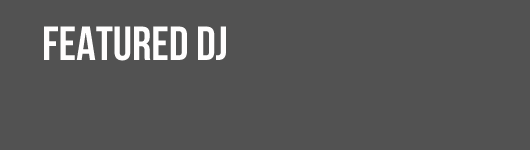
<style>
.page{position:relative;width:530px;height:150px;background:#525252}
.page>*{position:absolute;margin:0}
.t1{font:48px "BebasNeue";color:#fffefe}
</style>
<div class="page">
<p class="t1" style="left:44px;top:26px;width:182px;height:35px">featured dj</p>
</div>
